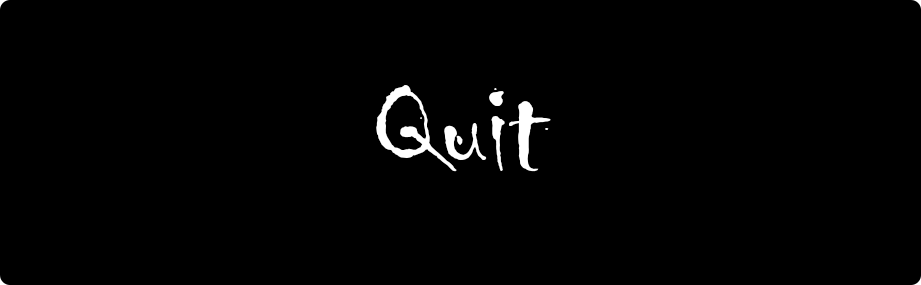
<style>
.page{position:relative;width:921px;height:285px;background:#000000}
.page>*{position:absolute;margin:0}
.t1{font:141.7px "Chiller-Regular";color:#ffffff}
</style>
<div class="page">
<p class="t1" style="left:376px;top:85px;width:175px;height:87px">Quit</p>
</div>
